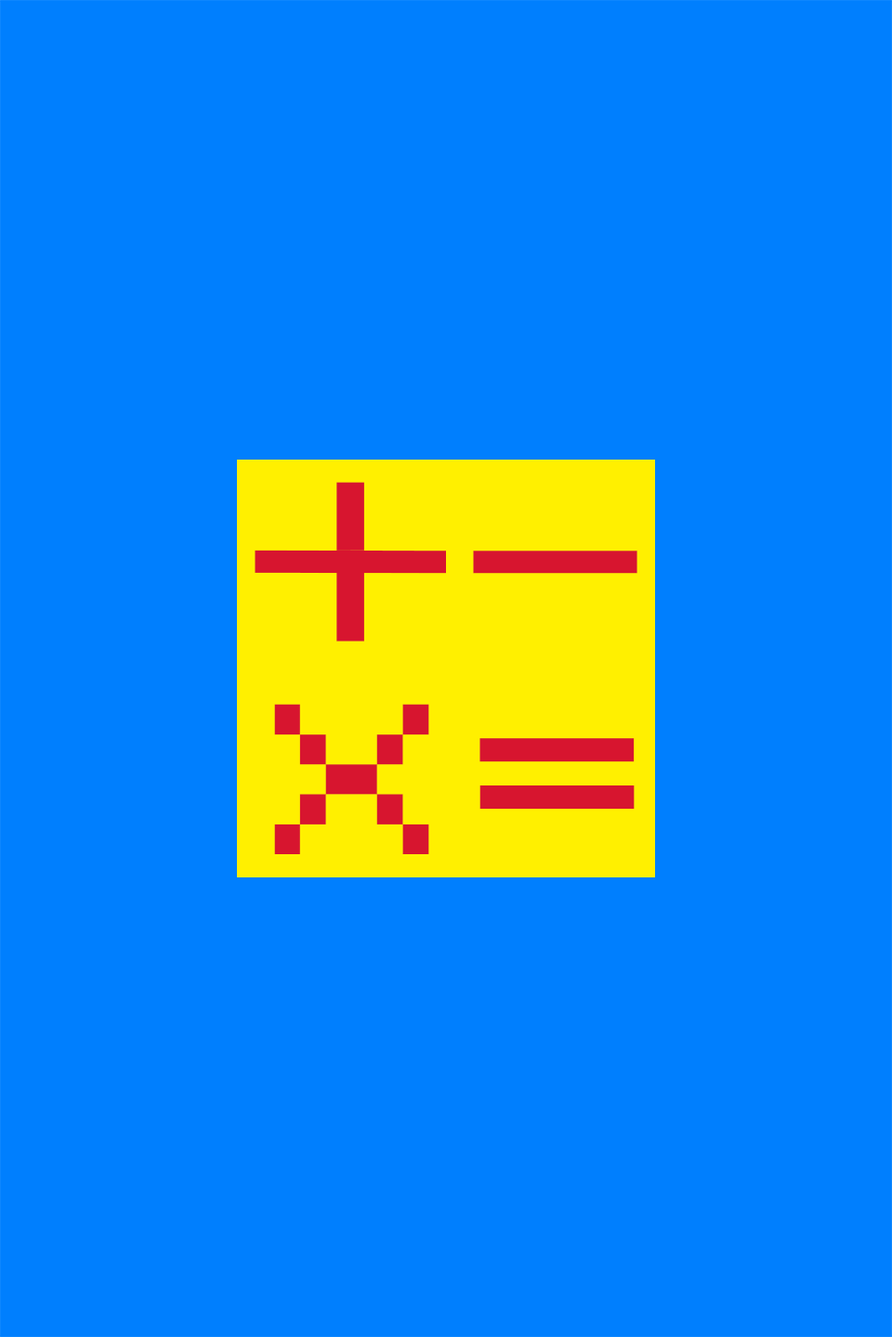
<style>
.page{position:relative;width:892px;height:1337px;background:#007ffe}
.page>*{position:absolute;margin:0}
.t1{font:363.3px "FreePixel-Regular";color:#d7152f;scale:1.2 1}
.t2{font:239.4px "FreePixel-Regular";color:#d7152f;scale:1.72 1}
.t3{font:376.1px "FreePixel-Regular";color:#d7152f;scale:1.09 1}
</style>
<div class="page">
<p class="t1" style="left:254px;top:482px;width:383px;height:160px">+-</p>
<p class="t2" style="left:274px;top:704px;width:155px;height:150px">X</p>
<p class="t3" style="left:479px;top:738px;width:155px;height:72px">=</p>
</div>
